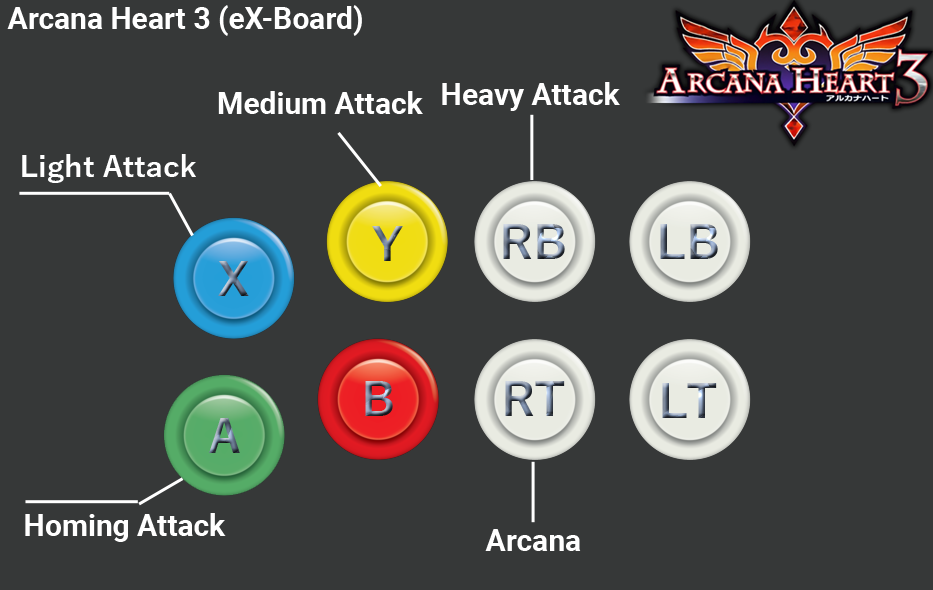
<style>
.page{position:relative;width:933px;height:590px;background:#363838}
.page>*{position:absolute;margin:0}
.t1{font:30px "Roboto-Bold";color:#ffffff}
.t2{font:30px "YuGothic-Bold";color:#ffffff}
</style>
<div class="page">
<p class="t1" style="left:7px;top:5px;width:355px;height:31px">Arcana Heart 3 (eX-Board)</p>
<p class="t1" style="left:442px;top:82px;width:178px;height:29px">Heavy Attack</p>
<p class="t1" style="left:218px;top:91px;width:205px;height:23px">Medium Attack</p>
<p class="t2" style="left:22px;top:154px;width:174px;height:29px">Light Attack</p>
<p class="t1" style="left:25px;top:513px;width:201px;height:29px">Homing Attack</p>
<p class="t1" style="left:485px;top:529px;width:96px;height:22px">Arcana</p>
</div>
